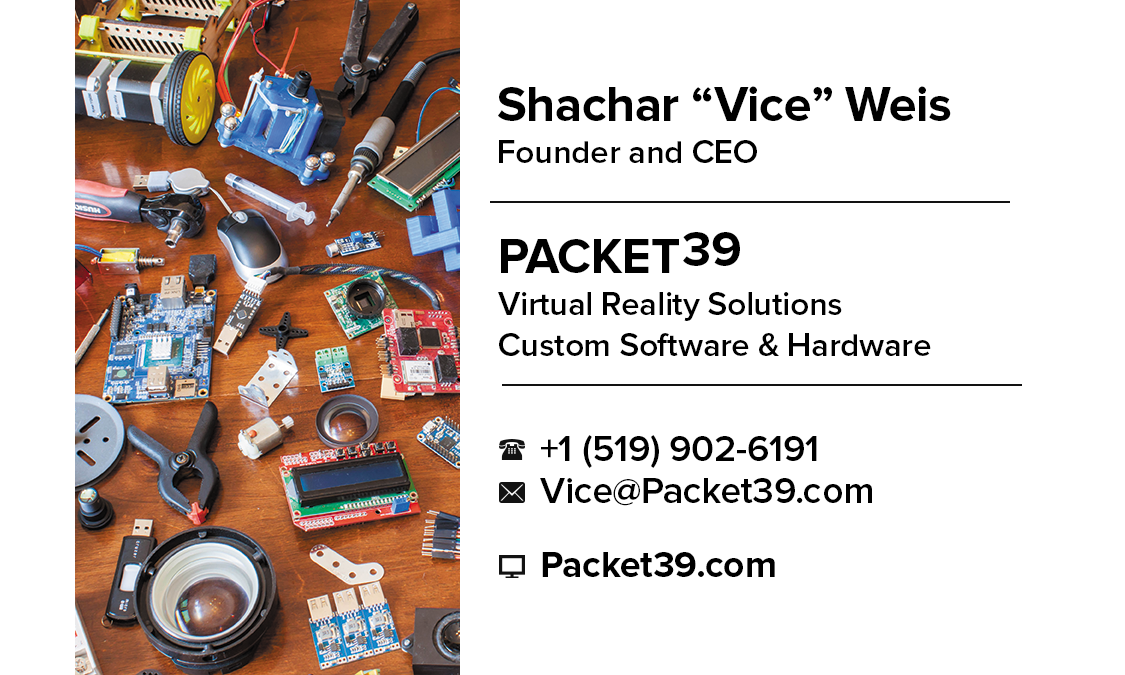
<style>
.page{position:relative;width:1125px;height:675px;background:#ffffff}
.page>*{position:absolute;margin:0}
.t1{font:50px/41.7px "ProximaNova-Bold";letter-spacing:-0.01em;color:#000000}
.t2{font:33.3px/41.7px "ProximaNova-Semibold";letter-spacing:-0.01em;color:#000000}
.t3{font:50px "ProximaNova-Bold";letter-spacing:-0.01em;color:#000000}
.t4{font:37.5px/41.7px "ProximaNova-Semibold";letter-spacing:-0.01em;color:#000000}
.t5{font:37.5px "ProximaNova-Bold";letter-spacing:-0.01em;color:#000000}
</style>
<div class="page">
<p class="t1" style="left:498px;top:86px;width:453px;height:77px">Shachar “Vice” Weis<br><span class="t2">Founder and CEO</span></p>
<p class="t3" style="left:683px;top:232px;width:57px;height:34px">39</p>
<p class="t2" style="left:498px;top:239px;width:433px;height:117px"><span class="t1">PACKET<br></span>Virtual Reality Solutions<br>Custom Software &amp; Hardware</p>
<p class="t4" style="left:540px;top:435px;width:332px;height:71px">+1 (519) 902-6191<br>Vice@Packet39.com</p>
<p class="t5" style="left:542px;top:552px;width:233px;height:25px">Packet39.com</p>
</div>
